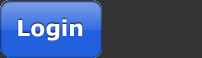
<style>
.page{position:relative;width:202px;height:58px;background:#333333}
.page>*{position:absolute;margin:0}
.t1{font:22px "Verdana-Bold";color:#ffffff}
</style>
<div class="page">
<p class="t1" style="left:18px;top:19px;width:65px;height:22px">Login</p>
</div>
